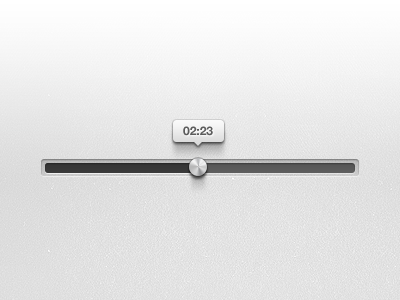
<style>
.page{position:relative;width:400px;height:300px}
.page>*{position:absolute;margin:0}
.t1{font:12px "HelveticaNeue-Bold";color:#5c5c5c}
</style>
<div class="page">
<p class="t1" style="left:183px;top:126px;width:30px;height:10px">02:23</p>
</div>
